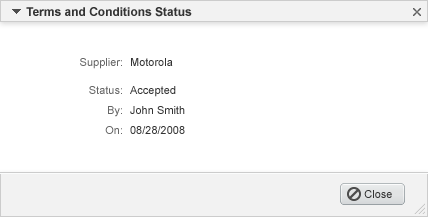
<style>
.page{position:relative;width:428px;height:217px;background:#ffffff}
.page>*{position:absolute;margin:0}
.t1{font:12px "Arial-BoldMT";color:#333333}
.t2{font:11px "ArialMT";color:#666666}
.t3{font:11px "ArialMT";color:#333333}
</style>
<div class="page">
<p class="t1" style="left:26px;top:7px;width:166px;height:10px">Terms and Conditions Status</p>
<p class="t2" style="left:80px;top:58px;width:42px;height:11px">Supplier:</p>
<p class="t3" style="left:131px;top:58px;width:42px;height:8px">Motorola</p>
<p class="t2" style="left:89px;top:86px;width:33px;height:8px">Status:</p>
<p class="t3" style="left:130px;top:86px;width:46px;height:11px">Accepted</p>
<p class="t2" style="left:108px;top:106px;width:14px;height:11px">By:</p>
<p class="t3" style="left:130px;top:106px;width:55px;height:8px">John Smith</p>
<p class="t2" style="left:105px;top:126px;width:17px;height:8px">On:</p>
<p class="t3" style="left:130px;top:126px;width:55px;height:8px">08/28/2008</p>
<p class="t3" style="left:364px;top:190px;width:28px;height:8px">Close</p>
</div>
